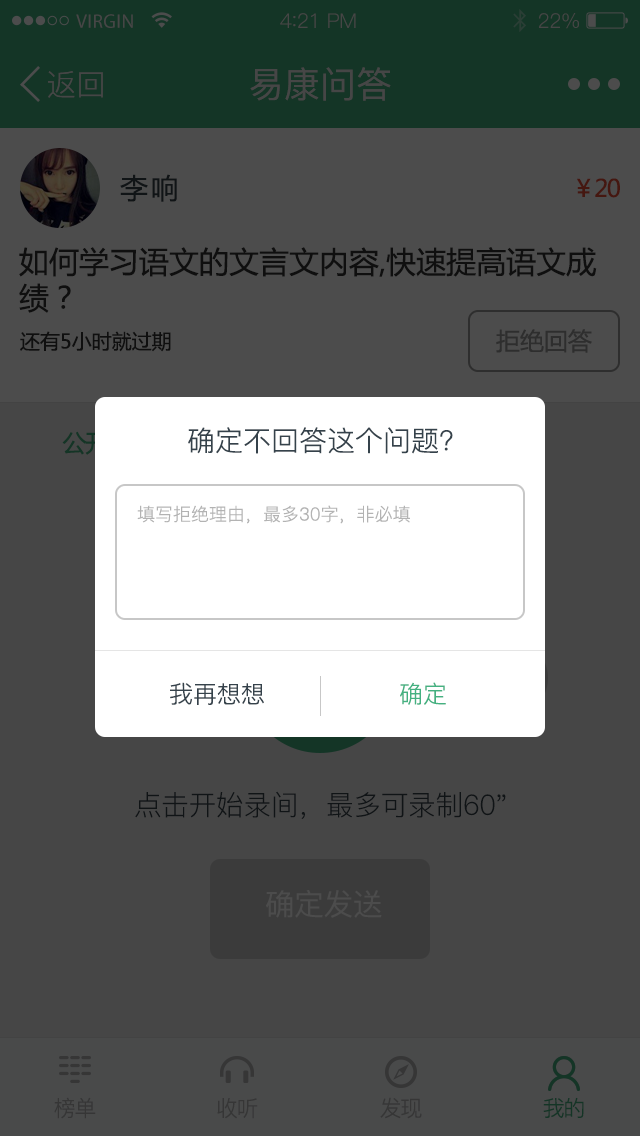
<style>
.page{position:relative;width:640px;height:1136px;background:#464646}
.page>*{position:absolute;margin:0}
.t1{font:19.6px "MyriadPro-Regular";letter-spacing:0.02em;color:#464646}
.t2{font:20.4px "PingFang-SC-Regular";letter-spacing:-0.02em;color:#464646}
.t3{font:22.1px "PingFang-SC-Regular";letter-spacing:-0.02em;color:#464646}
.t4{font:30px "PingFang-SC-Regular";color:#464646}
.t5{font:36px "PingFang-SC-Medium";color:#464646}
.t6{font:28px "MicrosoftYaHei";letter-spacing:0.1em;color:#101416}
.t7{font:24px "MicrosoftYaHei";letter-spacing:-0.06em;color:#451710}
.t8{font:30px/36px "MicrosoftYaHei";color:#0f0f0f}
.t9{font:24px "MicrosoftYaHei";color:#2e2e2e}
.t10{font:20px "MicrosoftYaHei";color:#0f0f0f}
.t11{font:28px "PingFang-SC-Regular";color:#35424b}
.t12{font:18px "PingFang-SC-Regular";color:#b3b3b3}
.t13{font:24px "PingFang-SC-Regular";color:#35424b}
.t14{font:24px "PingFang-SC-Regular";color:#44b181}
.t15{font:28px "PingFang-SC-Regular";letter-spacing:-0.02em;color:#101416}
.t16{font:30px "PingFang-SC-Medium";letter-spacing:-0.02em;color:#4c4c4c}
.t17{font:22px "PingFang-SC-Regular";letter-spacing:-0.06em;color:#363636}
.t18{font:22px "PingFang-SC-Regular";letter-spacing:-0.06em;color:#143526}
</style>
<div class="page">
<p class="t1" style="left:76px;top:14px;width:57px;height:14px">VIRGIN</p>
<p class="t2" style="left:280px;top:13px;width:76px;height:15px">4<span class="t3">:</span>21 PM</p>
<p class="t2" style="left:539px;top:13px;width:40px;height:16px">22%</p>
<p class="t4" style="left:48px;top:71px;width:55px;height:27px">返回</p>
<p class="t5" style="left:250px;top:67px;width:141px;height:34px">易康问答</p>
<p class="t6" style="left:120px;top:174px;width:57px;height:28px">李响</p>
<p class="t7" style="left:577px;top:178px;width:43px;height:20px">￥20</p>
<p class="t8" style="left:19px;top:247px;width:578px;height:66px">如何学习语文的文言文内容,快速提高语文成<br>绩？</p>
<p class="t9" style="left:496px;top:329px;width:96px;height:24px">拒绝回答</p>
<p class="t10" style="left:20px;top:331px;width:151px;height:21px">还有5小时就过期</p>
<p class="t11" style="left:188px;top:427px;width:265px;height:27px">确定不回答这个问题?</p>
<p class="t12" style="left:137px;top:505px;width:273px;height:19px">填写拒绝理由，最多30字，非必填</p>
<p class="t13" style="left:170px;top:682px;width:94px;height:23px">我再想想</p>
<p class="t14" style="left:400px;top:682px;width:46px;height:23px">确定</p>
<p class="t15" style="left:135px;top:791px;width:371px;height:28px">点击开始录间，最多可录制60"</p>
<p class="t16" style="left:266px;top:890px;width:116px;height:28px">确定发送</p>
<p class="t17" style="left:54px;top:1097px;width:42px;height:22px">榜单</p>
<p class="t17" style="left:380px;top:1097px;width:42px;height:22px">发现</p>
<p class="t18" style="left:543px;top:1097px;width:41px;height:21px">我的</p>
<p class="t17" style="left:217px;top:1098px;width:41px;height:21px">收听</p>
</div>
